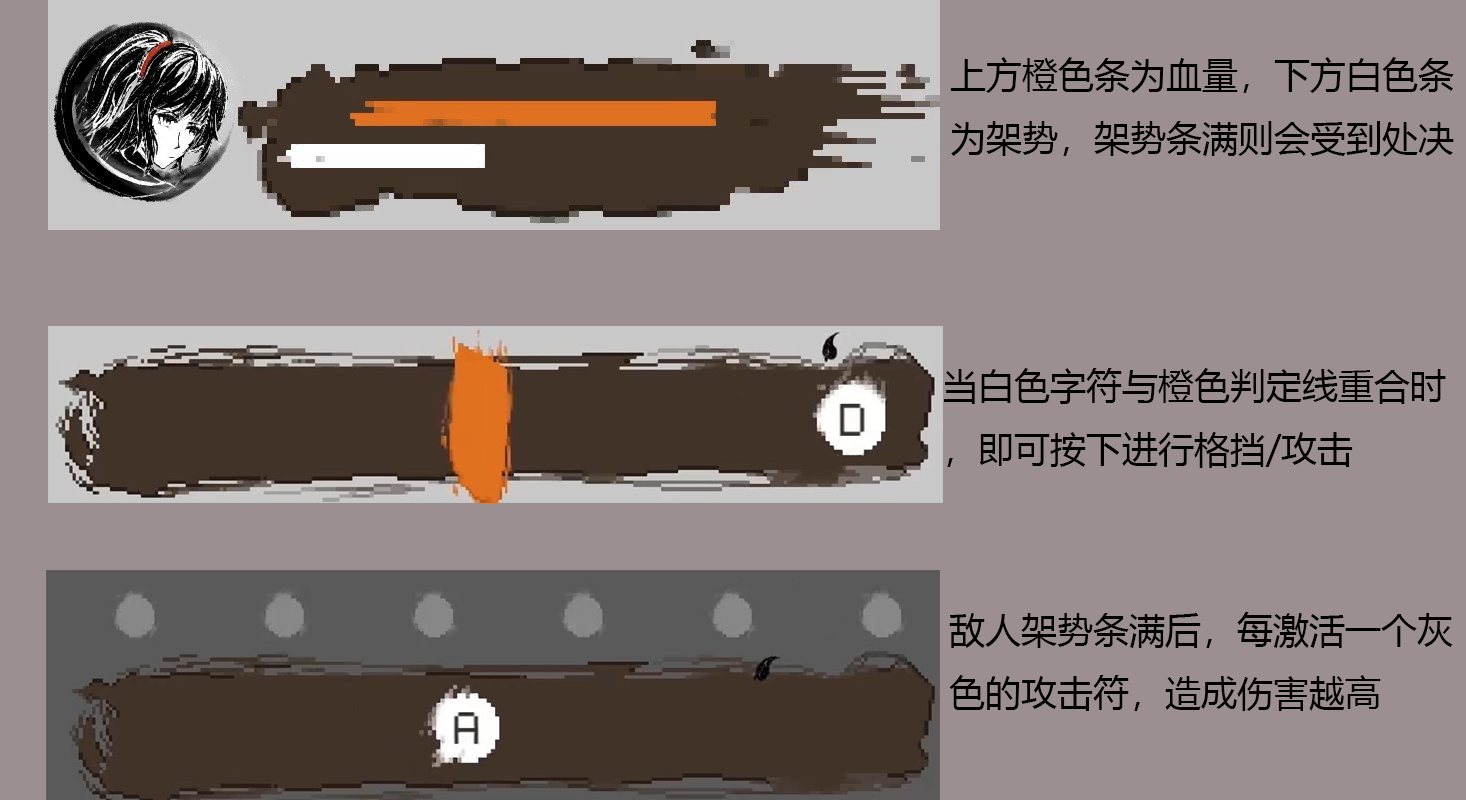
<style>
.page{position:relative;width:1466px;height:800px;background:#9b8f92}
.page>*{position:absolute;margin:0}
.t1{font:36px "MicrosoftYaHei";color:#000000}
</style>
<div class="page">
<p class="t1" style="left:950px;top:57px;width:504px;height:100px">上方橙色条为血量，下方白色条为架势，架势条满则会受到处决</p>
<p class="t1" style="left:944px;top:368px;width:502px;height:100px">当白色字符与橙色判定线重合时，即可按下进行格挡/攻击</p>
<p class="t1" style="left:949px;top:612px;width:504px;height:99px">敌人架势条满后，每激活一个灰色的攻击符，造成伤害越高</p>
</div>
